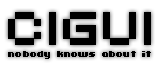
<style>
.page{position:relative;width:160px;height:64px;background:#ffffff}
.page>*{position:absolute;margin:0}
.t1{font:10px "Uni0563";letter-spacing:0.02em;color:#000000}
.t2{font:52px "Uni0553";letter-spacing:0.02em;color:#000000}
</style>
<div class="page">
<p class="t1" style="left:8px;top:12px;width:143px;height:47px"><span class="t2">CIGUI<br></span>nobody knows about it</p>
</div>
